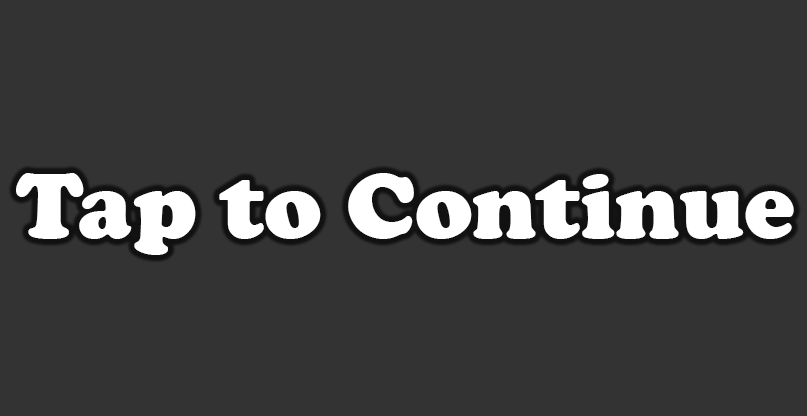
<style>
.page{position:relative;width:807px;height:416px;background:#333333}
.page>*{position:absolute;margin:0}
.t1{font:95.8px "CooperBlack";color:#ffffff}
</style>
<div class="page">
<p class="t1" style="left:16px;top:173px;width:778px;height:82px">Tap to Continue</p>
</div>
